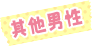
<style>
.page{position:relative;width:93px;height:47px;background:#ffffff}
.page>*{position:absolute;margin:0}
.t1{font:11.5px "shetumodengxiaofangti";color:#ef8299;font-weight:bold;scale:0.94 1}
</style>
<div class="page">
<p class="t1" style="left:11px;top:8px;width:72px;height:30px;rotate:-11deg">其他男性</p>
</div>
